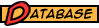
<style>
.page{position:relative;width:99px;height:28px;background:#ffffff}
.page>*{position:absolute;margin:0}
.t1{font:10.3px "AnimeAce2.0BB-Bold";color:#000000}
</style>
<div class="page">
<p class="t1" style="left:29px;top:8px;width:64px;height:11px">atabase</p>
</div>
